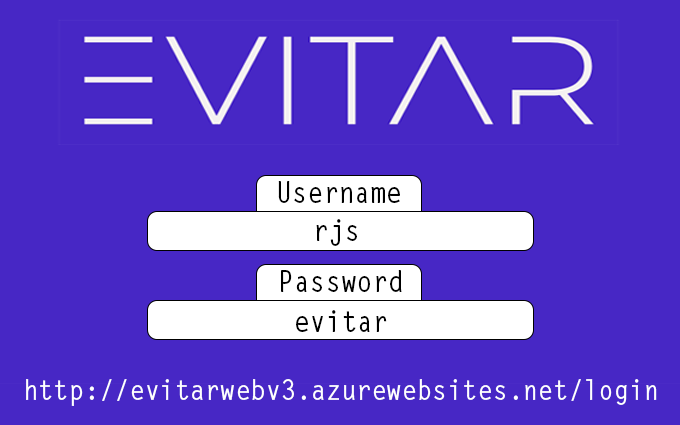
<style>
.page{position:relative;width:680px;height:425px;background:#4727c5}
.page>*{position:absolute;margin:0}
.t1{font:29.1px "LetterGothicStd-Bold";color:#000000;scale:0.9 1}
.t2{font:28px "LetterGothicStd-Bold";color:#ffffff;scale:0.9 1}
</style>
<div class="page">
<p class="t1" style="left:278px;top:181px;width:122px;height:22px">Username</p>
<p class="t1" style="left:316px;top:219px;width:41px;height:27px">rjs</p>
<p class="t1" style="left:281px;top:270px;width:121px;height:22px">Password</p>
<p class="t1" style="left:296px;top:310px;width:91px;height:22px">evitar</p>
<p class="t2" style="left:26px;top:379px;width:631px;height:27px">http://evitarwebv3.azurewebsites.net/login</p>
</div>
